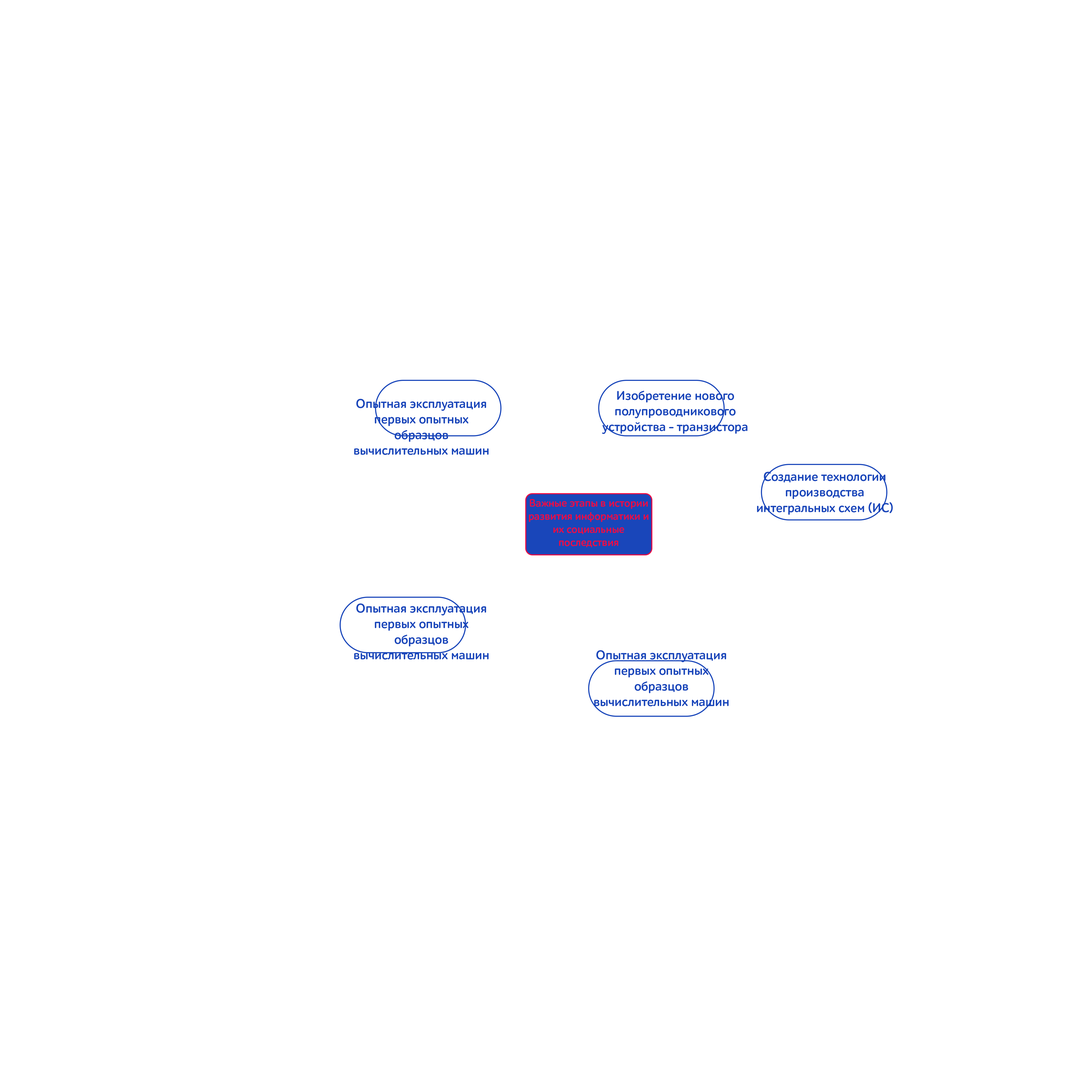
<style>
.page{position:relative;width:1092px;height:1092px;background:#ffffff}
.page>*{position:absolute;margin:0}
.t1{font:13px "ALSSchlangesans-Bold";color:#1946ba}
.t2{font:10.9px "ALSSchlangesans-Bold";color:#ec0b43}
</style>
<div class="page">
<p class="t1" style="left:354px;top:399px;width:135px;height:56px;text-align:center">Опытная эксплуатация первых опытных образцов вычислительных машин</p>
<p class="t1" style="left:602px;top:391px;width:146px;height:43px;text-align:center">Изобретение нового полупроводникового устройства - транзистора</p>
<p class="t1" style="left:757px;top:472px;width:136px;height:43px;text-align:center">Создание технологии производства интегральных схем (ИС)</p>
<p class="t2" style="left:529px;top:499px;width:119px;height:48px;text-align:center">Важные этапы в истории развития информатики и их социальные последствия</p>
<p class="t1" style="left:354px;top:603px;width:135px;height:57px;text-align:center">Опытная эксплуатация первых опытных образцов вычислительных машин</p>
<p class="t1" style="left:594px;top:650px;width:135px;height:56px;text-align:center">Опытная эксплуатация первых опытных образцов вычислительных машин</p>
</div>
